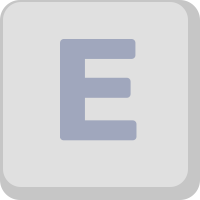
<style>
.page{position:relative;width:200px;height:200px;background:#e0e0e0}
.page>*{position:absolute;margin:0}
.t1{font:120px "TTTogether";color:#a0a7bd}
</style>
<div class="page">
<p class="t1" style="left:60px;top:39px;width:77px;height:102px">E</p>
</div>
